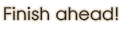
<style>
.page{position:relative;width:121px;height:29px;background:#ffffff}
.page>*{position:absolute;margin:0}
.t1{font:18px "NtreevSoft";color:#2b1e1e}
</style>
<div class="page">
<p class="t1" style="left:4px;top:6px;width:114px;height:15px">Finish ahead!</p>
</div>
